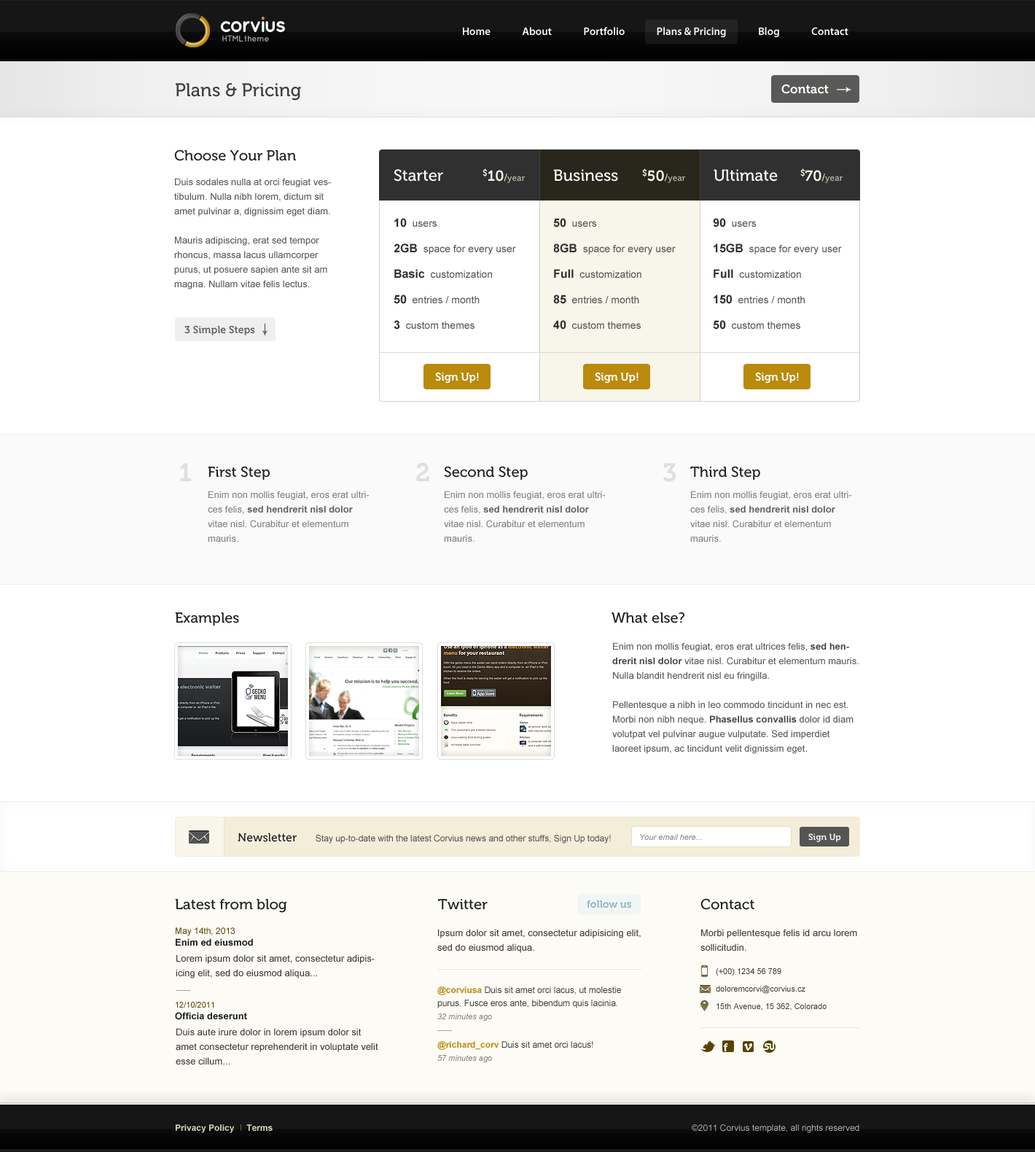
<style>
.page{position:relative;width:1035px;height:1152px;background:#ffffff}
.page>*{position:absolute;margin:0}
.t1{font:10.9px "MyriadPro-Semibold";color:#fefefe}
.t2{font:8.7px "QuicksandBold-Regular";letter-spacing:-0.07em;color:#a0a0a0}
.t3{font:8.7px "QuicksandBold-Regular";letter-spacing:-0.1em;color:#a0a0a0;text-transform:uppercase}
.t4{font:18.2px "Museo-500";color:#3f3f3f}
.t5{font:12.4px "Museo-700";color:#ffffff}
.t6{font:14.6px "Museo-500";color:#202020}
.t7{font:16px "Museo-500";color:#fefefe}
.t8{font:8.7px "Museo-500";color:#c0bcaf}
.t9{font:14.6px "Museo-700";color:#f8f5ea}
.t10{font:9.5px "Museo-500";color:#f3edd9}
.t11{font:9.5px/14.6px "ArialMT";color:#575757}
.t12{font:10.2px/25.5px "ArialMT";color:#575757}
.t13{font:11.7px/25.5px "Arial-BoldMT";color:#303030}
.t14{font:10.2px "Museo-700";color:#636363}
.t15{font:10.9px "Museo-700";color:#ffffff}
.t16{font:25.5px "Museo-700";color:#dfdfdf}
.t17{font:9.5px/14.6px "ArialMT";color:#7f7f7f}
.t18{font:9.5px/14.6px "Arial-BoldMT";color:#5e5e5e}
.t19{font:9.5px/14.6px "Arial-BoldMT";color:#444444}
.t20{font:11.7px "Museo-500";color:#181818}
.t21{font:8.7px "Museo-700";color:#ffffff}
.t22{font:8.7px "ArialMT";color:#4c4c4c}
.t23{font:8px "Arial-ItalicMT";color:#868585}
.t24{font:10.2px "Museo-700";color:#99c3ce}
.t25{font:9.5px/11.7px "Arial-BoldMT";color:#181818}
.t26{font:8.7px/11.7px "ArialMT";color:#594200}
.t27{font:9.5px/14.6px "ArialMT";color:#3d3c3c}
.t28{font:8px "ArialMT";color:#3d3c3c}
.t29{font:8.7px/13.1px "ArialMT";color:#3d3c3c}
.t30{font:8.7px/13.1px "Arial-BoldMT";color:#bc8e14}
.t31{font:8px/13.1px "Arial-ItalicMT";color:#858383}
.t32{font:8px/11.7px "ArialMT";color:#594200}
.t33{font:8.7px "Arial-BoldMT";color:#dcd6c1}
.t34{font:8.7px "ArialMT";color:#b2b2b2}
</style>
<div class="page">
<p class="t1" style="left:463px;top:27px;width:386px;height:10px">Home              About              Portfolio              Plans &amp; Pricing              Blog              Contact</p>
<p class="t2" style="left:222px;top:35px;width:47px;height:7px"><span class="t3">html </span>theme</p>
<p class="t4" style="left:176px;top:83px;width:125px;height:18px">Plans &amp; Pricing</p>
<p class="t5" style="left:782px;top:84px;width:47px;height:10px">Contact</p>
<p class="t6" style="left:174px;top:149px;width:122px;height:12px">Choose Your Plan</p>
<p class="t7" style="left:394px;top:169px;width:49px;height:13px">Starter</p>
<p class="t8" style="left:483px;top:168px;width:43px;height:15px"><span class="t9">$10</span><span class="t10">/</span>year</p>
<p class="t7" style="left:553px;top:169px;width:65px;height:13px">Business</p>
<p class="t8" style="left:642px;top:168px;width:44px;height:15px"><span class="t9">$50</span><span class="t10">/</span>year</p>
<p class="t7" style="left:714px;top:169px;width:64px;height:13px">Ultimate</p>
<p class="t8" style="left:800px;top:168px;width:43px;height:15px"><span class="t9">$70</span><span class="t10">/</span>year</p>
<p class="t11" style="left:174px;top:178px;width:157px;height:111px">Duis sodales nulla at orci feugiat vestibulum. Nulla nibh lorem, dictum sit amet pulvinar a, dignissim eget diam.<br><br>Mauris adipiscing, erat sed tempor rhoncus, massa lacus ullamcorper purus, ut posuere sapien ante sit am magna. Nullam vitae felis lectus.</p>
<p class="t12" style="left:394px;top:218px;width:122px;height:112px"><span class="t13">10  </span>users<br><span class="t13">2GB  </span>space for every user<br><span class="t13">Basic  </span>customization<br><span class="t13">50  </span>entries / month<br><span class="t13">3  </span>custom themes</p>
<p class="t12" style="left:553px;top:218px;width:123px;height:112px"><span class="t13">50  </span>users<br><span class="t13">8GB  </span>space for every user<br><span class="t13">Full  </span>customization<br><span class="t13">85  </span>entries / month<br><span class="t13">40  </span>custom themes</p>
<p class="t12" style="left:713px;top:218px;width:129px;height:112px"><span class="t13">90  </span>users<br><span class="t13">15GB  </span>space for every user<br><span class="t13">Full  </span>customization<br><span class="t13">150  </span>entries / month<br><span class="t13">50  </span>custom themes</p>
<p class="t14" style="left:184px;top:325px;width:71px;height:10px">3 Simple Steps</p>
<p class="t15" style="left:435px;top:373px;width:44px;height:10px">Sign Up!</p>
<p class="t15" style="left:595px;top:373px;width:44px;height:10px">Sign Up!</p>
<p class="t15" style="left:755px;top:373px;width:44px;height:10px">Sign Up!</p>
<p class="t16" style="left:180px;top:463px;width:12px;height:18px">1</p>
<p class="t6" style="left:208px;top:466px;width:62px;height:14px">First Step</p>
<p class="t16" style="left:416px;top:462px;width:13px;height:19px">2</p>
<p class="t6" style="left:444px;top:466px;width:84px;height:14px">Second Step</p>
<p class="t16" style="left:663px;top:463px;width:14px;height:19px">3</p>
<p class="t6" style="left:690px;top:466px;width:70px;height:14px">Third Step</p>
<p class="t17" style="left:208px;top:491px;width:162px;height:51px">Enim non mollis feugiat, eros erat ultrices felis, <span class="t18">sed hendrerit nisl dolor</span> vitae nisl. Curabitur et elementum mauris.</p>
<p class="t17" style="left:444px;top:491px;width:162px;height:51px">Enim non mollis feugiat, eros erat ultrices felis, <span class="t18">sed hendrerit nisl dolor</span> vitae nisl. Curabitur et elementum mauris.</p>
<p class="t17" style="left:690px;top:491px;width:162px;height:51px">Enim non mollis feugiat, eros erat ultrices felis, <span class="t18">sed hendrerit nisl dolor</span> vitae nisl. Curabitur et elementum mauris.</p>
<p class="t6" style="left:175px;top:612px;width:64px;height:14px">Examples</p>
<p class="t6" style="left:612px;top:612px;width:73px;height:11px">What else?</p>
<p class="t11" style="left:612px;top:642px;width:247px;height:112px">Enim non mollis feugiat, eros erat ultrices felis, <span class="t19">sed hendrerit nisl dolor</span> vitae nisl. Curabitur et elementum mauris. Nulla blandit hendrerit nisl eu fringilla. <br><br>Pellentesque a nibh in leo commodo tincidunt in nec est. Morbi non nibh neque. <span class="t19">Phasellus convallis</span> dolor id diam volutpat vel pulvinar augue vulputate. Sed imperdiet laoreet ipsum, ac tincidunt velit dignissim eget.</p>
<p class="t20" style="left:238px;top:833px;width:59px;height:9px">Newsletter</p>
<p class="t21" style="left:808px;top:833px;width:33px;height:9px">Sign Up</p>
<p class="t22" style="left:316px;top:835px;width:295px;height:8px">Stay up-to-date with the latest Corvius news and other stuffs, Sign Up today!</p>
<p class="t23" style="left:640px;top:834px;width:62px;height:6px">Your email here...</p>
<p class="t6" style="left:175px;top:899px;width:112px;height:14px">Latest from blog</p>
<p class="t6" style="left:438px;top:899px;width:50px;height:11px">Twitter</p>
<p class="t24" style="left:587px;top:900px;width:44px;height:8px">follow us</p>
<p class="t6" style="left:701px;top:898px;width:54px;height:12px">Contact</p>
<p class="t25" style="left:176px;top:927px;width:77px;height:19px"><span class="t26">May 14th, 2013<br></span>Enim ed eiusmod</p>
<p class="t27" style="left:437px;top:929px;width:204px;height:24px">Ipsum dolor sit amet, consectetur adipisicing elit, sed do eiusmod aliqua.</p>
<p class="t27" style="left:701px;top:929px;width:156px;height:22px">Morbi pellentesque felis id arcu lorem sollicitudin.</p>
<p class="t27" style="left:176px;top:954px;width:199px;height:24px">Lorem ipsum dolor sit amet, consectetur adipisicing elit, sed do eiusmod aliqua...</p>
<p class="t28" style="left:716px;top:968px;width:66px;height:8px">(+00) 1234 56 789</p>
<p class="t29" style="left:437px;top:986px;width:184px;height:35px"><span class="t30">@corviusa </span>Duis sit amet orci lacus, ut molestie purus. Fusce eros ante, bibendum quis lacinia.<br><span class="t31">32 minutes ago</span></p>
<p class="t28" style="left:716px;top:986px;width:90px;height:8px">doloremcorvi@corvius.cz</p>
<p class="t25" style="left:175px;top:1002px;width:72px;height:18px"><span class="t32">12/10/2011<br></span>Officia deserunt</p>
<p class="t28" style="left:717px;top:1003px;width:110px;height:7px">15th Avenue, 15 362, Colorado</p>
<p class="t27" style="left:176px;top:1028px;width:202px;height:36px">Duis aute irure dolor in lorem ipsum dolor sit amet consectetur reprehenderit in voluptate velit esse cillum...</p>
<p class="t29" style="left:437px;top:1041px;width:156px;height:22px"><span class="t30">@richard_corv </span>Duis sit amet orci lacus!<br><span class="t31">57 minutes ago</span></p>
<p class="t33" style="left:176px;top:1124px;width:97px;height:9px">Privacy Policy     Terms</p>
<p class="t34" style="left:692px;top:1124px;width:168px;height:9px">©2011 Corvius template, all rights reserved</p>
</div>
